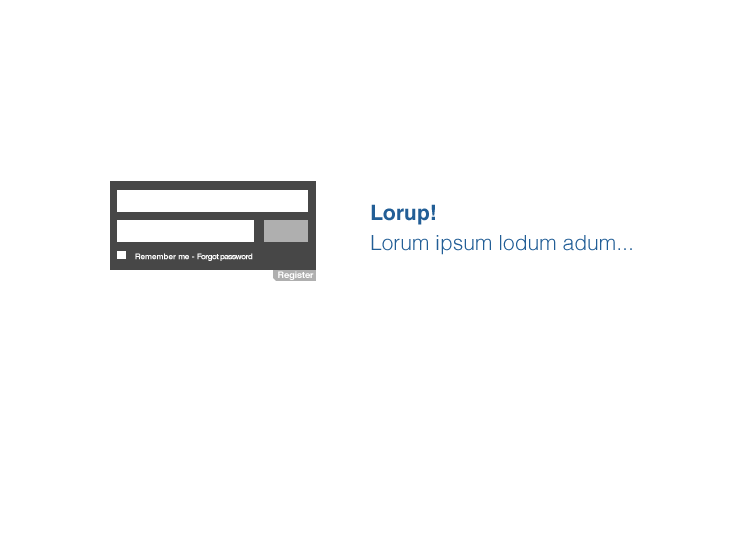
<style>
.page{position:relative;width:750px;height:541px;background:#ffffff}
.page>*{position:absolute;margin:0}
.t1{font:21px/30px "Helvetica-Light";color:#225e96}
.t2{font:21px/30px "Helvetica-Bold";color:#225e96}
.t3{font:8px "Helvetica-Bold";letter-spacing:-0.08em;color:#ffffff}
.t4{font:8px "Helvetica-Bold";color:#ffffff}
.t5{font:9px "Helvetica-Bold";color:#ffffff}
</style>
<div class="page">
<p class="t1" style="left:371px;top:204px;width:261px;height:51px"><span class="t2">Lorup!<br></span>Lorum ipsum lodum adum...</p>
<p class="t3" style="left:135px;top:253px;width:118px;height:8px"><span class="t4">Remember </span>me  -  Forgot password</p>
<p class="t5" style="left:278px;top:271px;width:36px;height:9px">Register</p>
</div>
